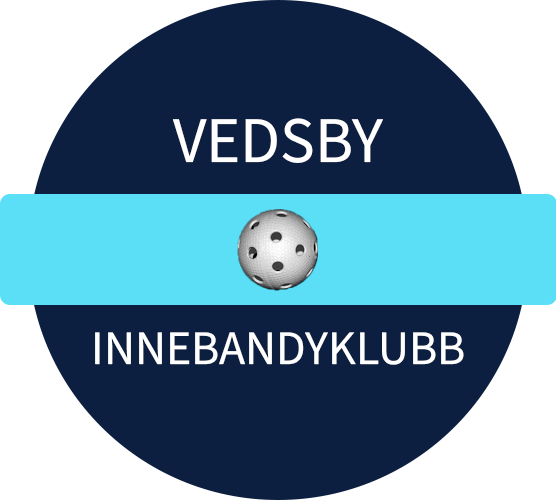
<style>
.page{position:relative;width:556px;height:500px;background:#0d1f41}
.page>*{position:absolute;margin:0}
.t1{font:48px "SourceSansRoman-Regular";color:#ffffff}
.t2{font:14px "TimesNewRomanPSMT";color:#ffffff}
.t3{font:65px "SourceSansRoman-Regular";color:#ffffff}
</style>
<div class="page">
<p class="t1" style="left:95px;top:118px;width:369px;height:247px;text-align:center"><span class="t2"><br> <br><br></span><span class="t3">VEDSBY <br><br><br><br><br><br></span>INNEBANDYKLUBB</p>
</div>
